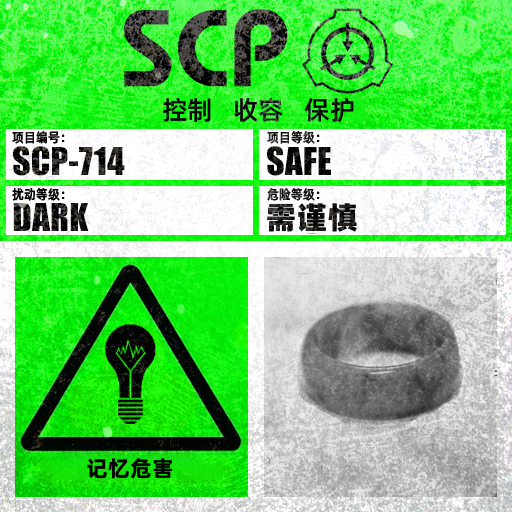
<style>
.page{position:relative;width:512px;height:512px}
.page>*{position:absolute;margin:0}
.t1{font:26px "AlibabaPuHuiTiM";color:#000000}
.t2{font:13.3px "AlibabaPuHuiTiM";letter-spacing:0.02em;color:#000000;scale:0.9 1}
.t3{font:13.3px "AlibabaPuHuiTiM";letter-spacing:0.02em;scale:0.9 1}
.t4{font:30.3px "AlibabaPuHuiTiH";letter-spacing:0.02em}
.t5{font:22px "AlibabaPuHuiTiB";letter-spacing:0.02em;color:#000000}
</style>
<div class="page">
<p class="t1" style="left:163px;top:97px;width:191px;height:26px">控制   收容   保护</p>
<p class="t2" style="left:12px;top:131px;width:53px;height:13px">项目编号：</p>
<p class="t3" style="left:267px;top:131px;width:53px;height:13px">项目等级：</p>
<p class="t2" style="left:12px;top:188px;width:53px;height:13px">扰动等级：</p>
<p class="t3" style="left:267px;top:188px;width:53px;height:13px">危险等级：</p>
<p class="t4" style="left:267px;top:203px;width:90px;height:29px">需谨慎</p>
<p class="t5" style="left:87px;top:458px;width:86px;height:21px">记忆危害</p>
</div>
